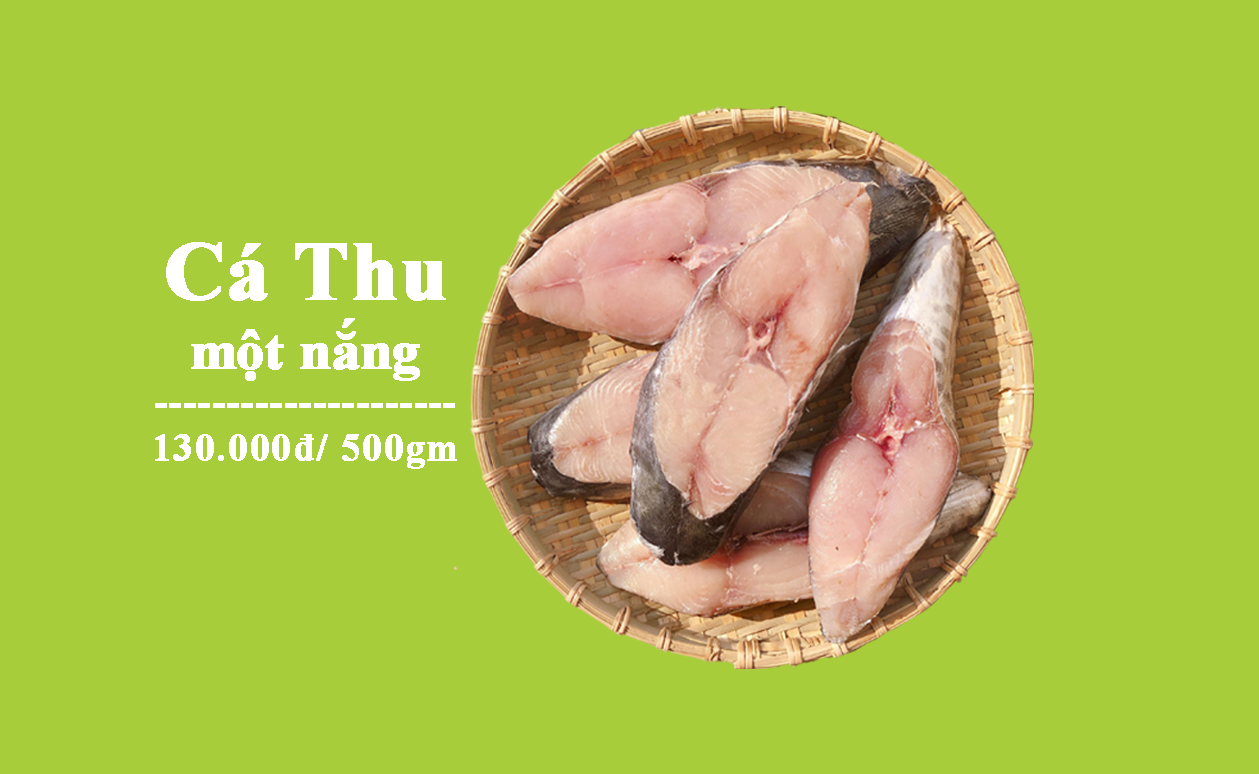
<style>
.page{position:relative;width:1259px;height:774px;background:#a7cd3a}
.page>*{position:absolute;margin:0}
.t1{font:38.3px "TimesNewRomanPS-BoldMT";color:#ffffff;font-weight:bold}
.t2{font:84.1px "TimesNewRomanPS-BoldMT";color:#ffffff;font-weight:bold}
.t3{font:56.1px "TimesNewRomanPS-BoldMT";color:#ffffff;font-weight:bold}
</style>
<div class="page">
<p class="t1" style="left:155px;top:242px;width:302px;height:227px;text-align:center"><span class="t2">Cá Thu<br> </span><span class="t3">một nắng <br></span>---------------------<br>130.000đ/ 500gm</p>
</div>
